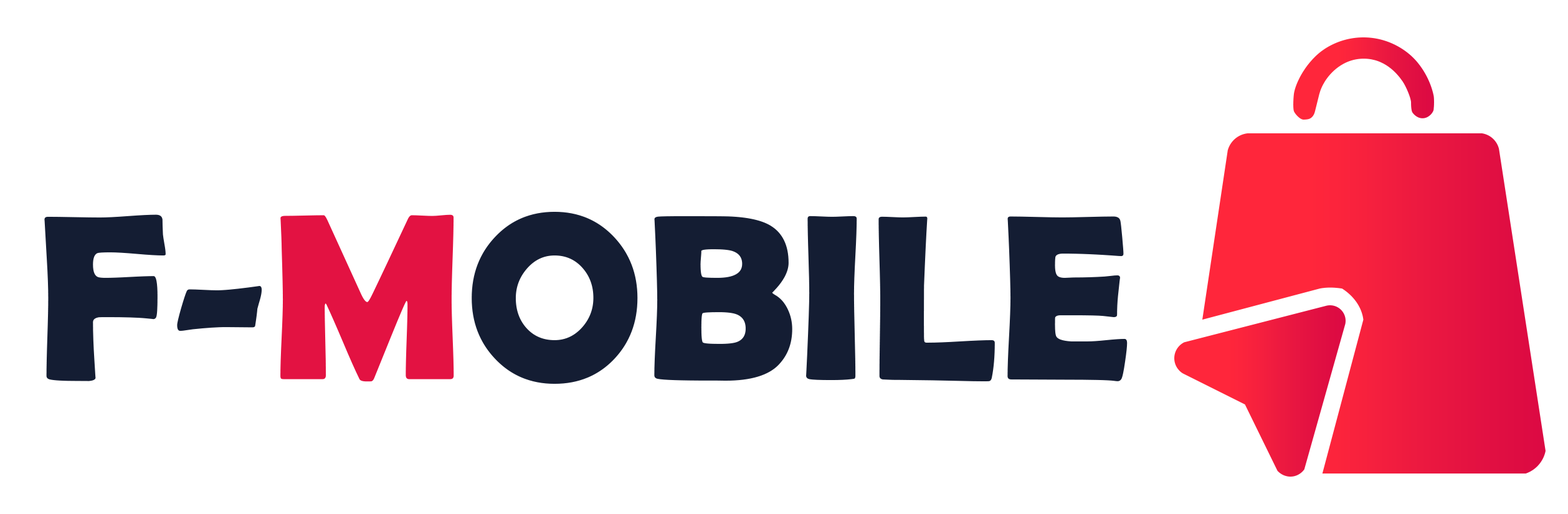
<style>
.page{position:relative;width:1568px;height:514px;background:#ffffff}
.page>*{position:absolute;margin:0}
.t1{font:238.3px "BerlinSansFBDemi-Bold";color:#141d33;text-transform:uppercase}
.t2{font:238.3px "BerlinSansFBDemi-Bold";color:#e31242;text-transform:uppercase}
</style>
<div class="page">
<p class="t1" style="left:44px;top:212px;width:1084px;height:172px">F-<span class="t2">M</span>obile</p>
</div>
